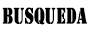
<style>
.page{position:relative;width:90px;height:35px;background:#ffffff}
.page>*{position:absolute;margin:0}
.t1{font:23.4px "Stencil";color:#000000;font-weight:bold;scale:0.69 1}
</style>
<div class="page">
<p class="t1" style="left:2px;top:7px;width:85px;height:18px">BUSQUEDA</p>
</div>
